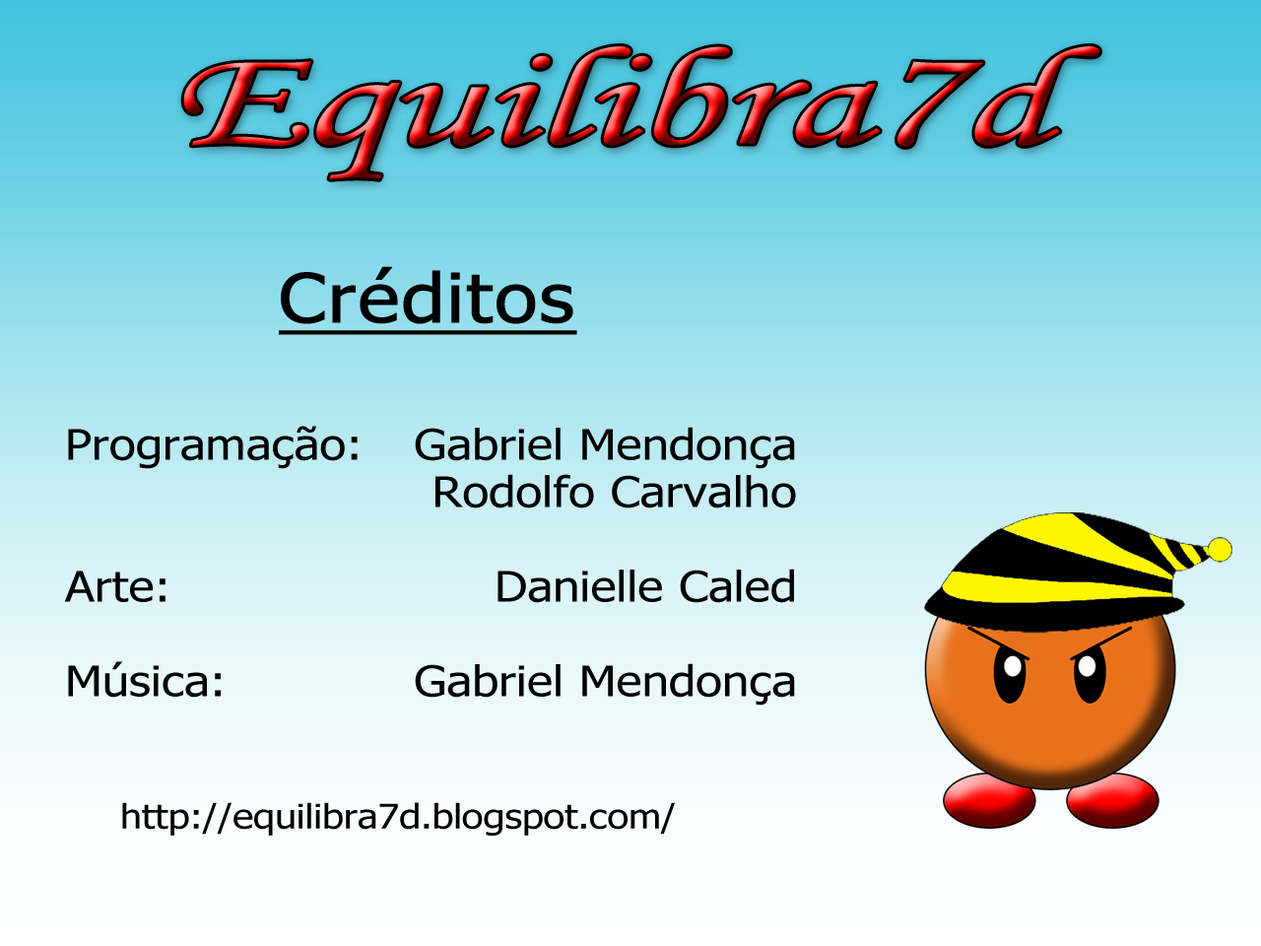
<style>
.page{position:relative;width:1261px;height:946px}
.page>*{position:absolute;margin:0}
.t1{font:140.6px "MonotypeCorsiva";letter-spacing:0.005em;scale:1.5 1}
.t2{font:67.5px "Tahoma";letter-spacing:0.005em;color:#000000;font-weight:bold;text-decoration:underline;scale:1.16 1}
.t3{font:42.2px "Tahoma";letter-spacing:0.005em;color:#000000;scale:1.16 1}
.t4{font:33.7px "Tahoma";letter-spacing:0.005em;color:#000000;scale:1.16 1}
</style>
<div class="page">
<p class="t1" style="left:183px;top:46px;width:916px;height:133px">Equilibra7d</p>
<p class="t2" style="left:279px;top:266px;width:298px;height:69px">Créditos</p>
<p class="t3" style="left:64px;top:426px;width:294px;height:271px">Programação: <br> <br><br>Arte:<br><br>Música:</p>
<p class="t3" style="left:122px;top:427px;width:674px;height:408px;text-align:right">Gabriel Mendonça<br>Rodolfo Carvalho<br><br>Danielle Caled<br><br>Gabriel Mendonça<br><br><br><span class="t4">http://equilibra7d.blogspot.com/</span></p>
</div>
